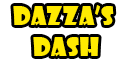
<style>
.page{position:relative;width:128px;height:64px;background:#ffffff}
.page>*{position:absolute;margin:0}
.t1{font:25.5px "ShowcardGothic-Reg";color:#ffea01}
</style>
<div class="page">
<p class="t1" style="left:13px;top:5px;width:101px;height:52px;text-align:center">DAZZA’s <br>DASH</p>
</div>
